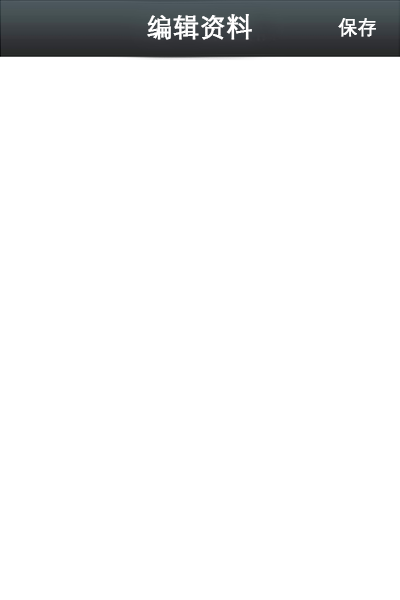
<style>
.page{position:relative;width:400px;height:600px;background:#ffffff}
.page>*{position:absolute;margin:0}
.t1{font:26px "DengXian";color:#ffffff;font-weight:bold}
.t2{font:18.7px "DengXian";color:#ffffff;font-weight:bold}
</style>
<div class="page">
<p class="t1" style="left:147px;top:14px;width:105px;height:26px">编辑资料</p>
<p class="t2" style="left:338px;top:18px;width:38px;height:19px">保存</p>
</div>
